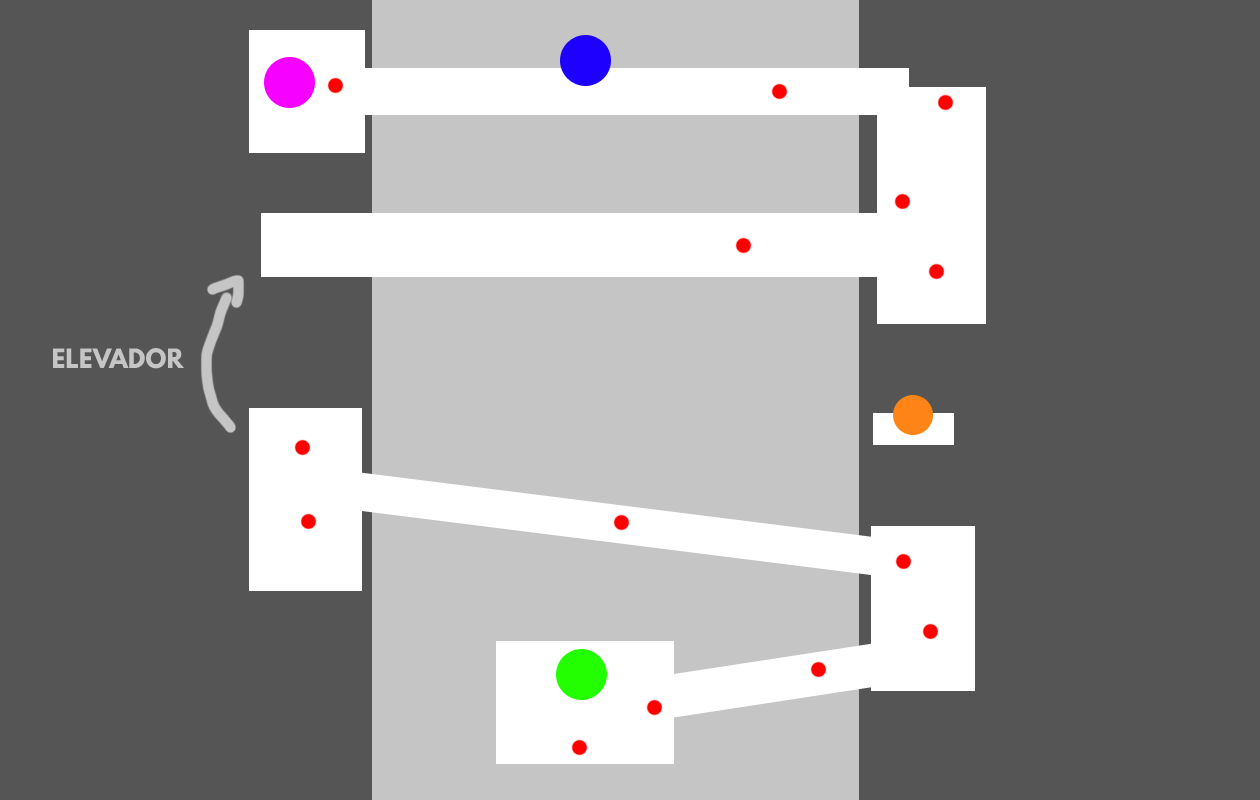
<style>
.page{position:relative;width:1260px;height:800px;background:#555555}
.page>*{position:absolute;margin:0}
.t1{font:23.8px "LeagueSpartan-Bold";color:#c5c5c5}
</style>
<div class="page">
<p class="t1" style="left:53px;top:348px;width:131px;height:21px">ELEVADOR</p>
</div>
